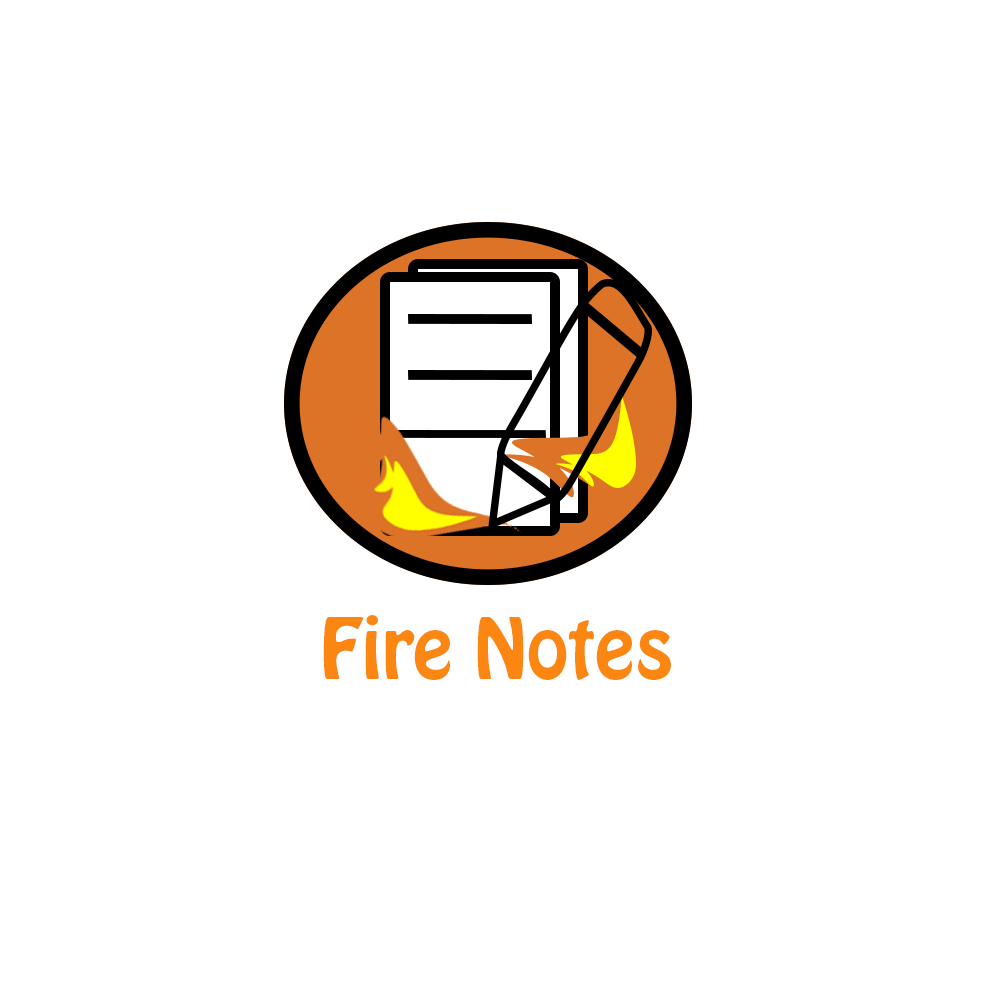
<style>
.page{position:relative;width:1000px;height:1000px;background:#ffffff}
.page>*{position:absolute;margin:0}
.t1{font:75px "HoboStd";color:#fc8612}
</style>
<div class="page">
<p class="t1" style="left:323px;top:615px;width:348px;height:65px">Fire Notes</p>
</div>
